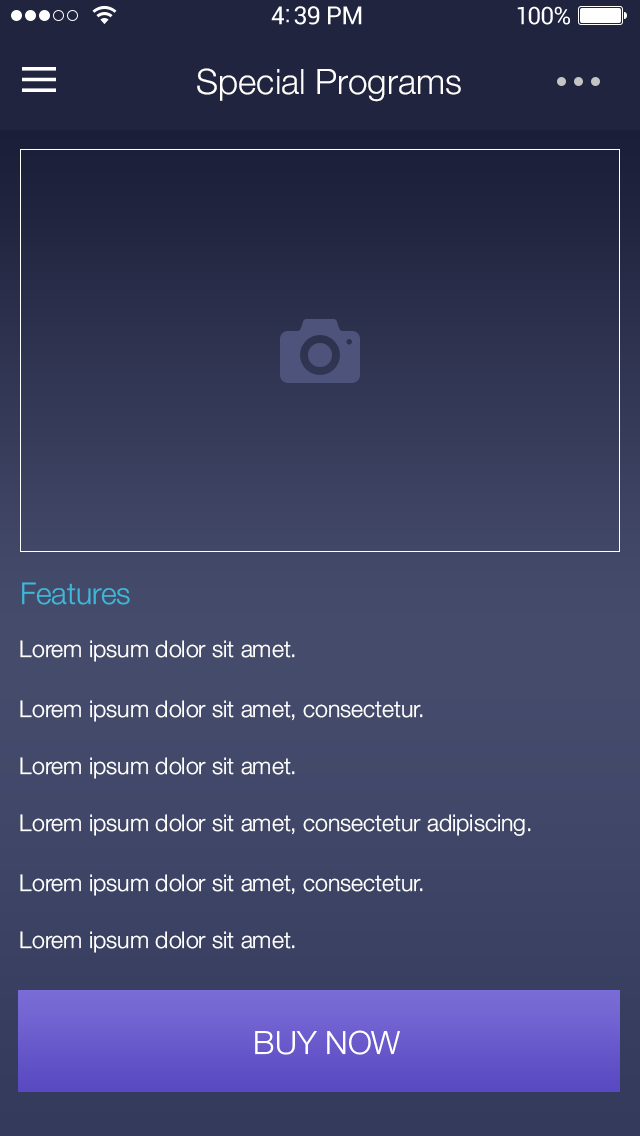
<style>
.page{position:relative;width:640px;height:1136px}
.page>*{position:absolute;margin:0}
.t1{font:35px "HelveticaNeue-Light";color:#ffffff}
.t2{font:30px "HelveticaNeue-Light";color:#3fb7d9}
.t3{font:23px "HelveticaNeue-Light";color:#ffffff}
.t4{font:32px "HelveticaNeue-Light";color:#ffffff}
</style>
<div class="page">
<p class="t1" style="left:197px;top:68px;width:264px;height:34px">Special Programs</p>
<p class="t2" style="left:22px;top:582px;width:108px;height:23px">Features</p>
<p class="t3" style="left:20px;top:640px;width:275px;height:22px">Lorem ipsum dolor sit amet.</p>
<p class="t3" style="left:20px;top:700px;width:403px;height:22px">Lorem ipsum dolor sit amet, consectetur.</p>
<p class="t3" style="left:20px;top:757px;width:275px;height:22px">Lorem ipsum dolor sit amet.</p>
<p class="t3" style="left:20px;top:814px;width:511px;height:22px">Lorem ipsum dolor sit amet, consectetur adipiscing.</p>
<p class="t3" style="left:20px;top:874px;width:403px;height:22px">Lorem ipsum dolor sit amet, consectetur.</p>
<p class="t3" style="left:20px;top:931px;width:275px;height:22px">Lorem ipsum dolor sit amet.</p>
<p class="t4" style="left:255px;top:1030px;width:145px;height:25px">BUY NOW</p>
</div>
